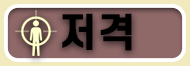
<style>
.page{position:relative;width:190px;height:66px}
.page>*{position:absolute;margin:0}
.t1{font:39px "S-CoreDream-6Bold";color:#000000;font-weight:bold}
</style>
<div class="page">
<p class="t1" style="left:62px;top:13px;width:70px;height:38px">저격</p>
</div>
